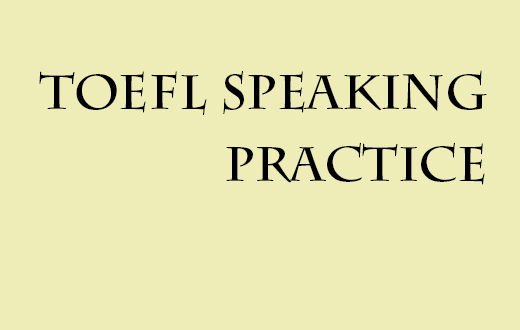
<style>
.page{position:relative;width:520px;height:330px;background:#efedb7}
.page>*{position:absolute;margin:0}
.t1{font:48px "CharlemagneStd-Bold";color:#000000}
</style>
<div class="page">
<p class="t1" style="left:39px;top:70px;width:448px;height:45px">Toefl Speaking</p>
<p class="t1" style="left:226px;top:142px;width:259px;height:43px">Practice</p>
</div>
